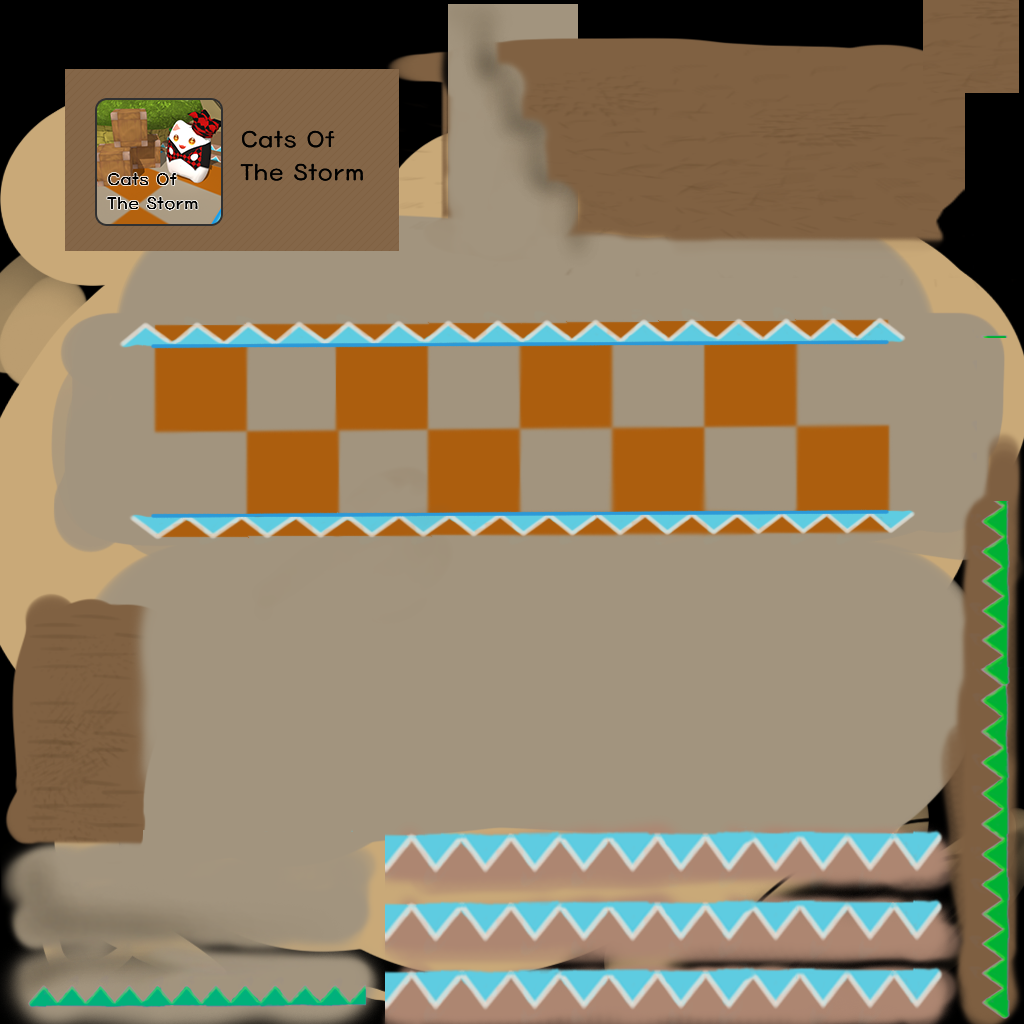
<style>
.page{position:relative;width:1024px;height:1024px;background:#a2947e}
.page>*{position:absolute;margin:0}
.t1{font:23.8px/33.1px "HaanBaekjeM";letter-spacing:0.006em;color:#000000}
.t2{font:17.5px/24.4px "HaanBaekjeM";letter-spacing:0.006em;color:#000000}
</style>
<div class="page">
<p class="t1" style="left:240px;top:130px;width:123px;height:51px">Cats Of<br>The Storm</p>
<p class="t2" style="left:107px;top:173px;width:91px;height:37px">Cats Of<br>The Storm</p>
</div>
